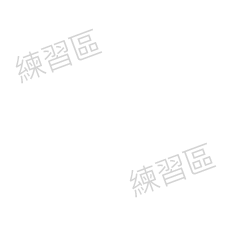
<style>
.page{position:relative;width:229px;height:229px;background:#ffffff}
.page>*{position:absolute;margin:0}
.t1{font:31.1px "MicrosoftJhengHeiRegular";letter-spacing:-0.05em;color:#d3d3d3}
</style>
<div class="page">
<p class="t1" style="left:15px;top:28px;width:88px;height:56px;rotate:-20deg">練習區</p>
<p class="t1" style="left:129px;top:142px;width:88px;height:56px;rotate:-20deg">練習區</p>
</div>
